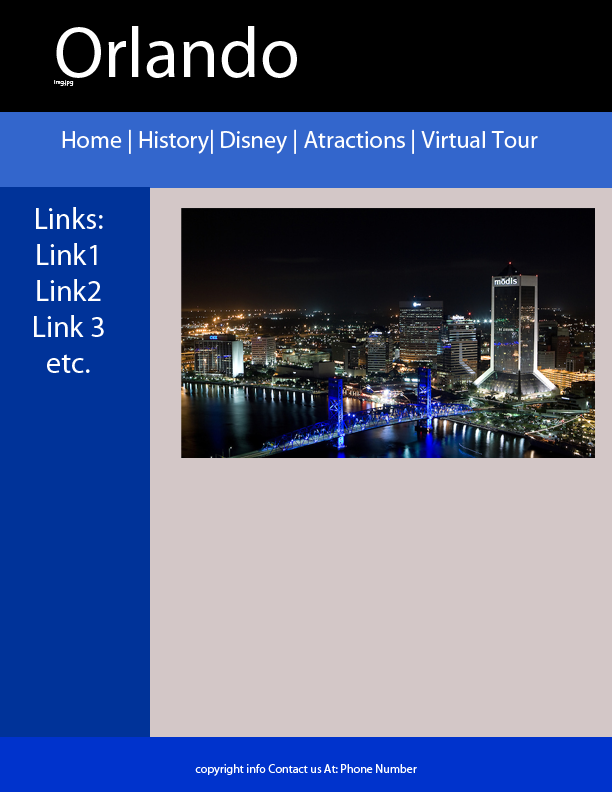
<style>
.page{position:relative;width:612px;height:792px;background:#d3c7c7}
.page>*{position:absolute;margin:0}
.t1{font:72px "MyriadPro-Regular";color:#ffffff}
.t2{font:6px "MyriadPro-Regular";color:#ffffff}
.t3{font:24px "MyriadPro-Regular";color:#ffffff}
.t4{font:30px "MyriadPro-Regular";color:#ffffff}
.t5{font:12px "MyriadPro-Regular";color:#ffffff}
</style>
<div class="page">
<p class="t1" style="left:54px;top:26px;width:243px;height:60px">Orlando <span class="t2">Img.jpg</span></p>
<p class="t3" style="left:62px;top:129px;width:476px;height:25px">Home | History| Disney | Atractions | Virtual Tour</p>
<p class="t4" style="left:34px;top:207px;width:70px;height:166px;text-align:center">Links:<br>Link1<br>Link2<br>Link 3<br>etc.</p>
<p class="t5" style="left:195px;top:764px;width:222px;height:12px">copyright info Contact us At: Phone Number</p>
</div>
